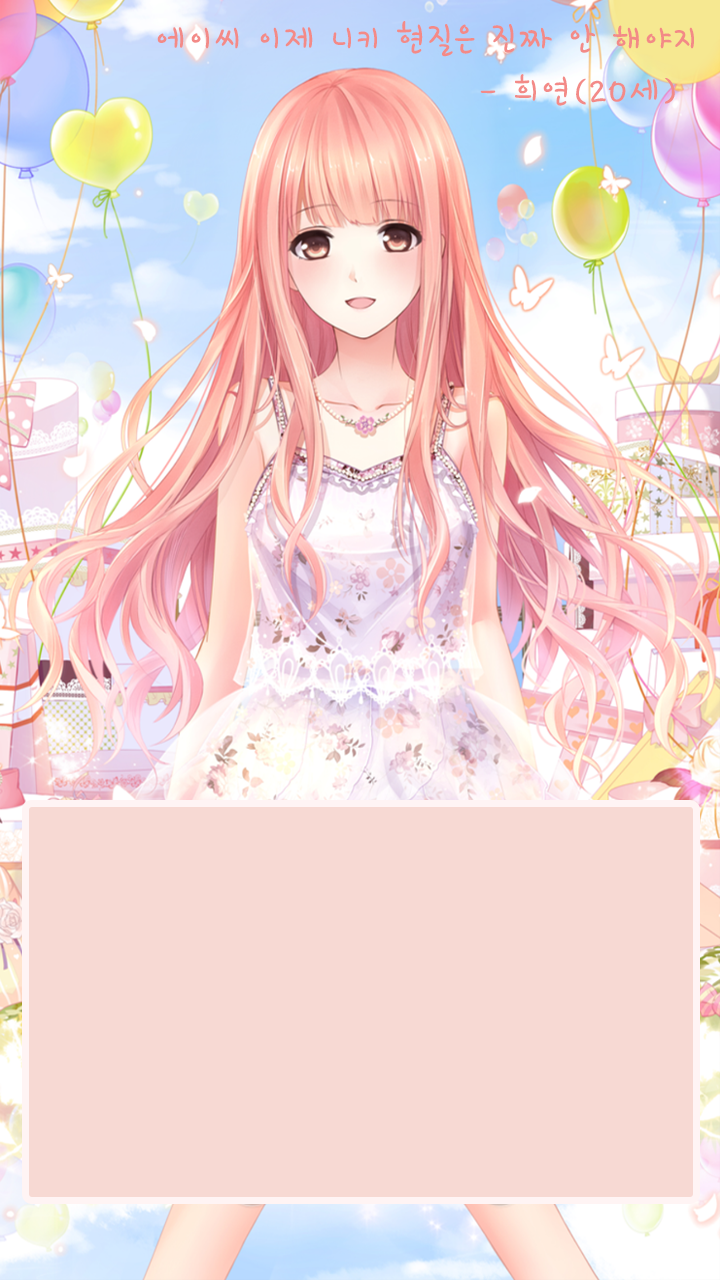
<style>
.page{position:relative;width:720px;height:1280px;background:#f7d9d3}
.page>*{position:absolute;margin:0}
.t1{font:43px "HoonWcatR";letter-spacing:0.05em;color:#f38a87}
</style>
<div class="page">
<p class="t1" style="left:157px;top:21px;width:537px;height:85px">에이씨 이제 니키 현질은 진짜 안 해야지<br>         - 희연(20세)</p>
</div>
